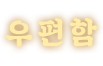
<style>
.page{position:relative;width:103px;height:66px;background:#ffffff}
.page>*{position:absolute;margin:0}
.t1{font:31.7px "SDKukdetopokki-bBd";letter-spacing:0.12em;color:#ffeca9;scale:0.96 1}
</style>
<div class="page">
<p class="t1" style="left:5px;top:17px;width:92px;height:30px">우편함</p>
</div>
